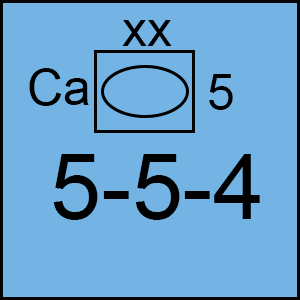
<style>
.page{position:relative;width:300px;height:300px;background:#74b4e4}
.page>*{position:absolute;margin:0}
.t1{font:50px "ArialMT";color:#000000}
.t2{font:91.7px "ArialMT";color:#000000}
</style>
<div class="page">
<p class="t1" style="left:122px;top:20px;width:50px;height:26px">xx</p>
<p class="t1" style="left:29px;top:68px;width:60px;height:38px">Ca</p>
<p class="t1" style="left:209px;top:74px;width:24px;height:36px">5</p>
<p class="t2" style="left:53px;top:154px;width:207px;height:66px">5-5-4</p>
</div>
